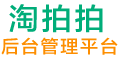
<style>
.page{position:relative;width:120px;height:60px;background:#ffffff}
.page>*{position:absolute;margin:0}
.t1{font:30px "FZLTZHK--GBK1-0";letter-spacing:0.1em;color:#00ad79}
.t2{font:18px "FZLTZHK--GBK1-0";letter-spacing:0.1em;color:#fd8e00}
</style>
<div class="page">
<p class="t1" style="left:9px;top:4px;width:94px;height:29px">淘拍拍</p>
<p class="t2" style="left:1px;top:37px;width:117px;height:18px">后台管理平台</p>
</div>
